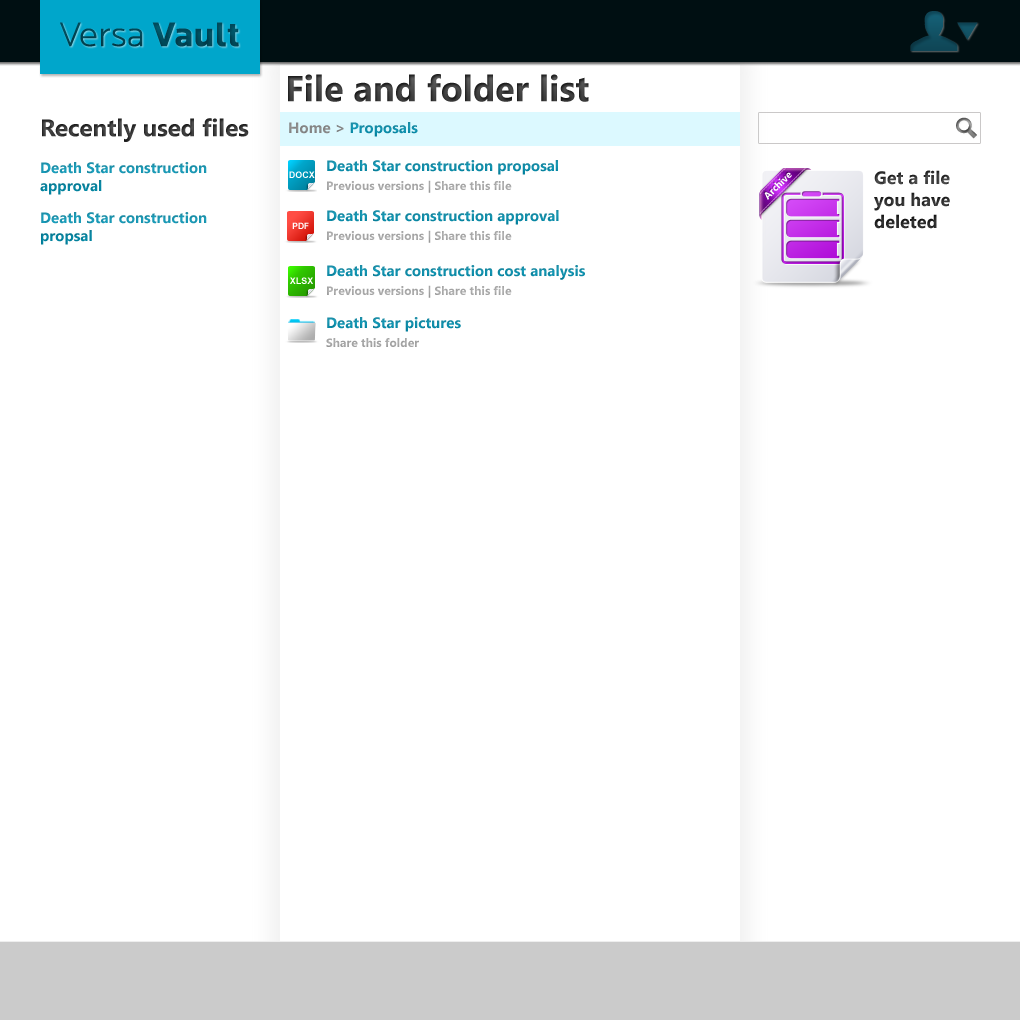
<style>
.page{position:relative;width:1020px;height:1020px;background:#ffffff}
.page>*{position:absolute;margin:0}
.t1{font:36px "SegoeUI-Bold";color:#444444}
.t2{font:24px "SegoeUI-Bold";color:#444444}
.t3{font:15px "SegoeUI-Bold"}
.t4{font:15px "SegoeUI-Bold";color:#118ca8}
.t5{font:15px "SegoeUI-Bold";color:#1a92ad}
.t6{font:9px "Arial-BoldMT";color:#ffffff}
.t7{font:10px "SegoeUI-Bold";color:#ffffff}
.t8{font:18px "SegoeUI-Bold";color:#444444}
.t9{font:12px "SegoeUI-Bold";color:#a8a8a8}
.t10{font:15px "SegoeUI-Bold";color:#1a93af}
.t11{font:8.6px "Arial-BoldMT";color:#ffffff}
.t12{font:15px "SegoeUI-Bold";color:#128eaa}
.t13{font:15px "SegoeUI-Bold";color:#128da9}
.t14{font:12px "SegoeUI-Bold";color:#a4a4a4}
</style>
<div class="page">
<p class="t1" style="left:288px;top:74px;width:301px;height:28px">File and folder list</p>
<p class="t2" style="left:42px;top:118px;width:207px;height:24px">Recently used files</p>
<p class="t3" style="left:289px;top:122px;width:129px;height:15px">Home &gt; Proposals</p>
<p class="t4" style="left:327px;top:160px;width:231px;height:15px">Death Star construction proposal</p>
<p class="t5" style="left:40px;top:162px;width:167px;height:33px">Death Star construction <br>approval</p>
<p class="t6" style="left:289px;top:171px;width:26px;height:7px">DOCX</p>
<p class="t7" style="left:764px;top:172px;width:28px;height:28px;rotate:-45deg">Archive</p>
<p class="t8" style="left:874px;top:170px;width:76px;height:59px">Get a file you have deleted</p>
<p class="t9" style="left:327px;top:180px;width:185px;height:13px">Previous versions | Share this file</p>
<p class="t10" style="left:41px;top:212px;width:166px;height:33px">Death Star construction propsal</p>
<p class="t11" style="left:292px;top:222px;width:17px;height:7px">PDF</p>
<p class="t4" style="left:327px;top:210px;width:232px;height:15px">Death Star construction approval</p>
<p class="t9" style="left:327px;top:230px;width:185px;height:13px">Previous versions | Share this file</p>
<p class="t12" style="left:327px;top:265px;width:258px;height:15px">Death Star construction cost analysis</p>
<p class="t6" style="left:290px;top:277px;width:23px;height:7px">XLSX</p>
<p class="t9" style="left:327px;top:285px;width:185px;height:13px">Previous versions | Share this file</p>
<p class="t13" style="left:327px;top:317px;width:134px;height:15px">Death Star pictures</p>
<p class="t14" style="left:326px;top:338px;width:93px;height:9px">Share this folder</p>
</div>
